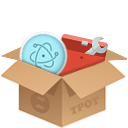
<style>
.page{position:relative;width:128px;height:128px;background:#ffffff}
.page>*{position:absolute;margin:0}
.t1{font:10.4px "CooperBlack";color:#b5845c;scale:1.06 1}
</style>
<div class="page">
<p class="t1" style="left:69px;top:96px;width:30px;height:19px;rotate:-23deg">TPOT</p>
</div>
